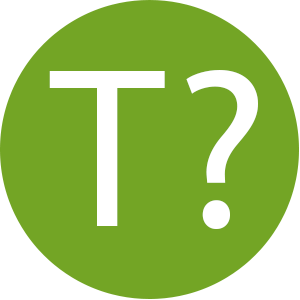
<style>
.page{position:relative;width:300px;height:300px;background:#73a525}
.page>*{position:absolute;margin:0}
.t1{font:230px "MyriadPro-Regular";color:#ffffff}
</style>
<div class="page">
<p class="t1" style="left:49px;top:71px;width:116px;height:155px">T</p>
<p class="t1" style="left:186px;top:70px;width:72px;height:159px">?</p>
</div>
